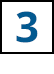
<style>
.page{position:relative;width:54px;height:74px;background:#ffffff}
.page>*{position:absolute;margin:0}
.t1{font:42px "OpenSans-Bold";color:#035990}
</style>
<div class="page">
<p class="t1" style="left:16px;top:11px;width:22px;height:32px">3</p>
</div>
